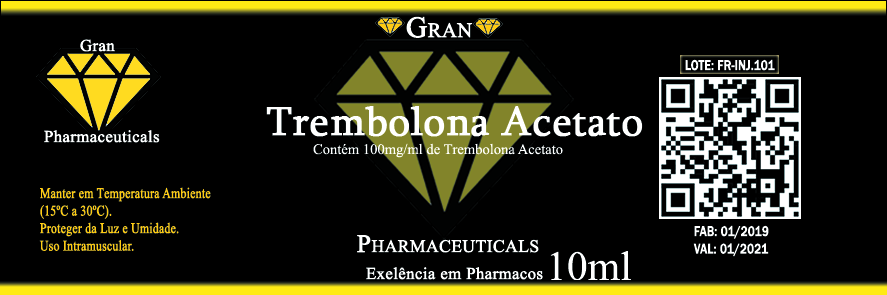
<style>
.page{position:relative;width:887px;height:295px;background:#000000}
.page>*{position:absolute;margin:0}
.t1{font:29.2px "MongolianBaiti";color:#ffffff;font-variant:small-caps;font-weight:bold}
.t2{font:16.7px "MongolianBaiti";color:#ffffff;font-weight:bold}
.t3{font:14.6px "FranklinGothic-Medium";color:#ffffff;font-weight:bold;scale:0.8 1}
.t4{font:41.7px "Sylfaen";color:#ffffff;font-weight:bold}
.t5{font:14.6px "MongolianBaiti";color:#ffffff}
.t6{font:14.6px "MongolianBaiti";color:#feca10;font-weight:bold;scale:0.8 1}
.t7{font:25px "MongolianBaiti";color:#ffffff;font-variant:small-caps;font-weight:bold}
.t8{font:41.7px "MongolianBaiti";color:#ffffff}
</style>
<div class="page">
<p class="t1" style="left:406px;top:16px;width:67px;height:22px">Gran</p>
<p class="t2" style="left:80px;top:39px;width:35px;height:13px">Gran</p>
<p class="t3" style="left:685px;top:59px;width:90px;height:12px">LOTE: FR-INJ.101</p>
<p class="t4" style="left:266px;top:106px;width:377px;height:31px">Trembolona Acetato</p>
<p class="t2" style="left:44px;top:130px;width:116px;height:13px">Pharmaceuticals</p>
<p class="t5" style="left:313px;top:143px;width:250px;height:15px">Contém 100mg/ml de Trembolona Acetato</p>
<p class="t6" style="left:39px;top:187px;width:172px;height:64px">Manter em Temperatura Ambiente<br>(15ºC a 30ºC). <br>Proteger da Luz e Umidade.<br>Uso Intramuscular.</p>
<p class="t3" style="left:693px;top:225px;width:76px;height:32px">FAB: 01/2019<br>VAL: 01/2021</p>
<p class="t7" style="left:357px;top:235px;width:182px;height:18px">Pharmaceuticals</p>
<p class="t8" style="left:550px;top:251px;width:81px;height:30px">10ml</p>
<p class="t2" style="left:366px;top:267px;width:177px;height:13px">Exelência em Pharmacos</p>
</div>
